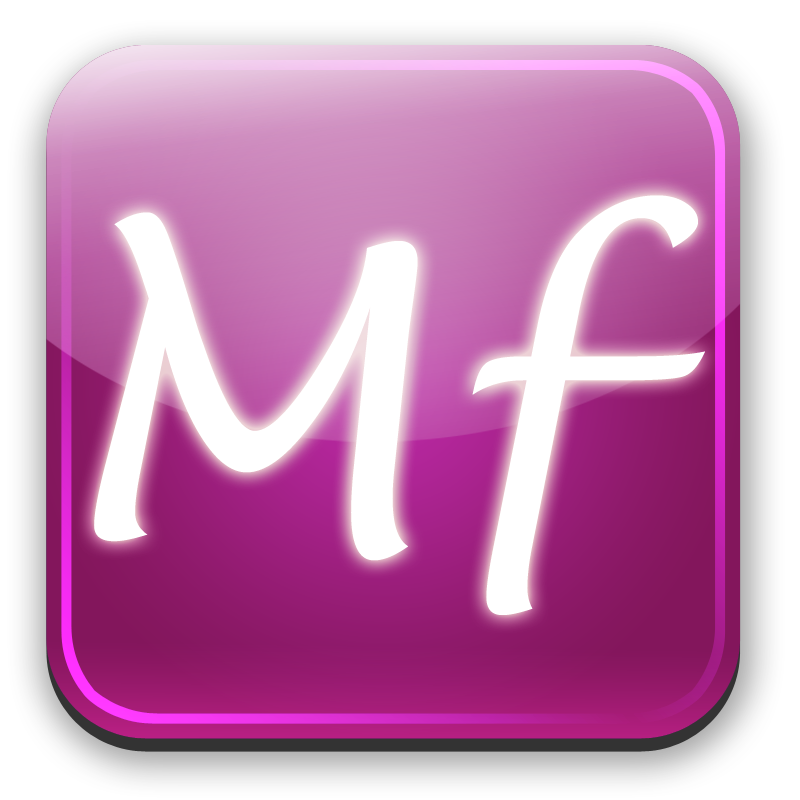
<style>
.page{position:relative;width:800px;height:800px}
.page>*{position:absolute;margin:0}
.t1{font:395.8px "LucidaHandwriting-Italic";letter-spacing:0.075em;color:#ffffff}
</style>
<div class="page">
<p class="t1" style="left:94px;top:195px;width:611px;height:420px">Mf</p>
</div>
